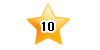
<style>
.page{position:relative;width:100px;height:50px;background:#ffffff}
.page>*{position:absolute;margin:0}
.t1{font:12px "Dotum";color:#000000;font-weight:bold}
</style>
<div class="page">
<p class="t1" style="left:42px;top:22px;width:12px;height:9px">10</p>
</div>
